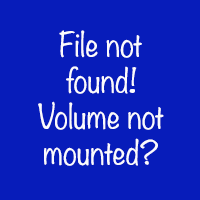
<style>
.page{position:relative;width:200px;height:200px;background:#071cba}
.page>*{position:absolute;margin:0}
.t1{font:30px "Noteworthy-Light";color:#fbfbfd}
</style>
<div class="page">
<p class="t1" style="left:38px;top:30px;width:126px;height:136px;text-align:center">File not found!<br>Volume not mounted?</p>
</div>
